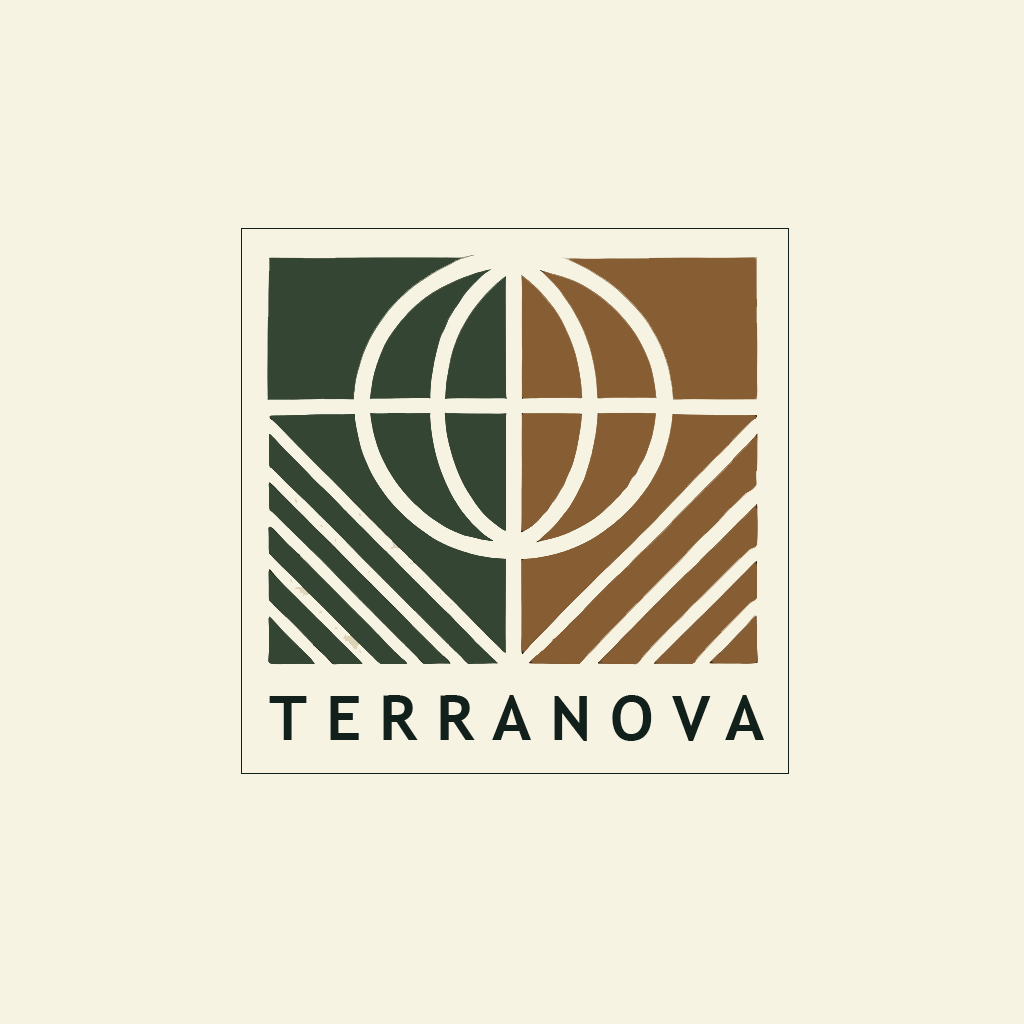
<style>
.page{position:relative;width:1024px;height:1024px;background:#f7f3e2}
.page>*{position:absolute;margin:0}
.t1{font:62px "TrebuchetMS-Bold";letter-spacing:0.3em;color:#11201b}
</style>
<div class="page">
<p class="t1" style="left:269px;top:695px;width:495px;height:46px">TERRANOVA</p>
</div>
